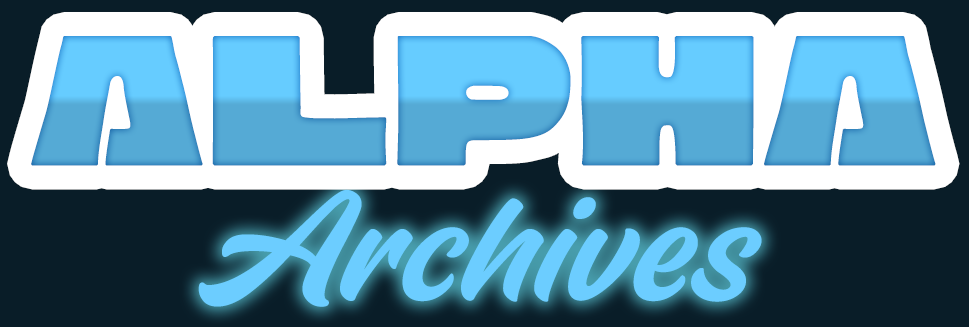
<style>
.page{position:relative;width:969px;height:327px;background:#091d28}
.page>*{position:absolute;margin:0}
.t1{font:205.5px "Cubao_Free_Wide"}
.t2{font:163.3px "Fineday-StyleOnenon-connect";color:#6ccdff}
</style>
<div class="page">
<p class="t1" style="left:31px;top:36px;width:905px;height:130px">ALPHA</p>
<p class="t2" style="left:198px;top:189px;width:564px;height:118px">Archives</p>
</div>
